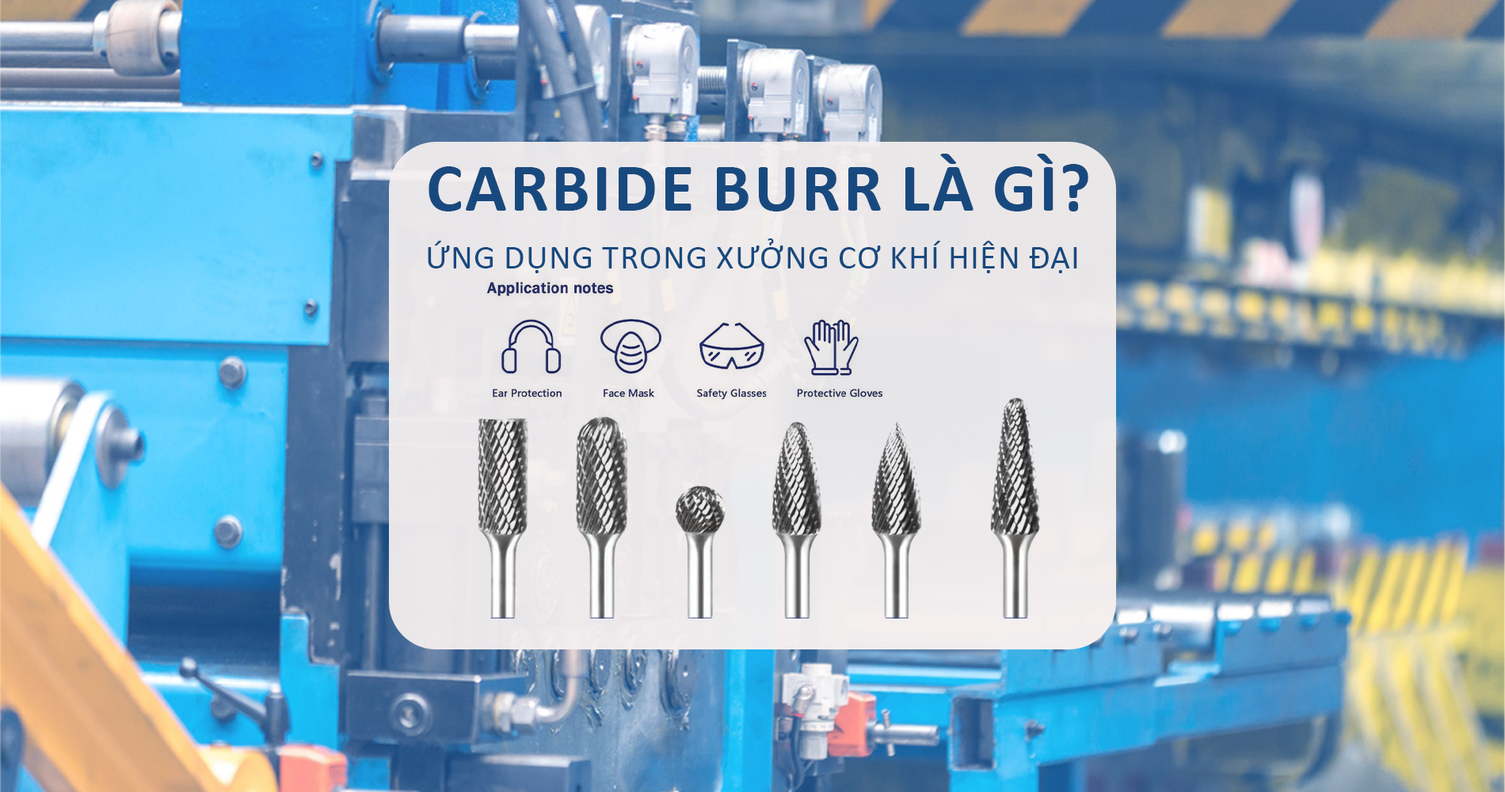
<style>
.page{position:relative;width:1505px;height:792px}
.page>*{position:absolute;margin:0}
.t1{font:69.1px "Calibri-Bold";color:#18497e;text-transform:uppercase}
.t2{font:33.7px "Calibri";color:#18497e;text-transform:uppercase}
</style>
<div class="page">
<p class="t1" style="left:429px;top:154px;width:659px;height:58px">Carbide Burr là gì?</p>
<p class="t2" style="left:428px;top:238px;width:649px;height:35px">Ứng dụng trong xưởng cơ khí hiện đại</p>
</div>
